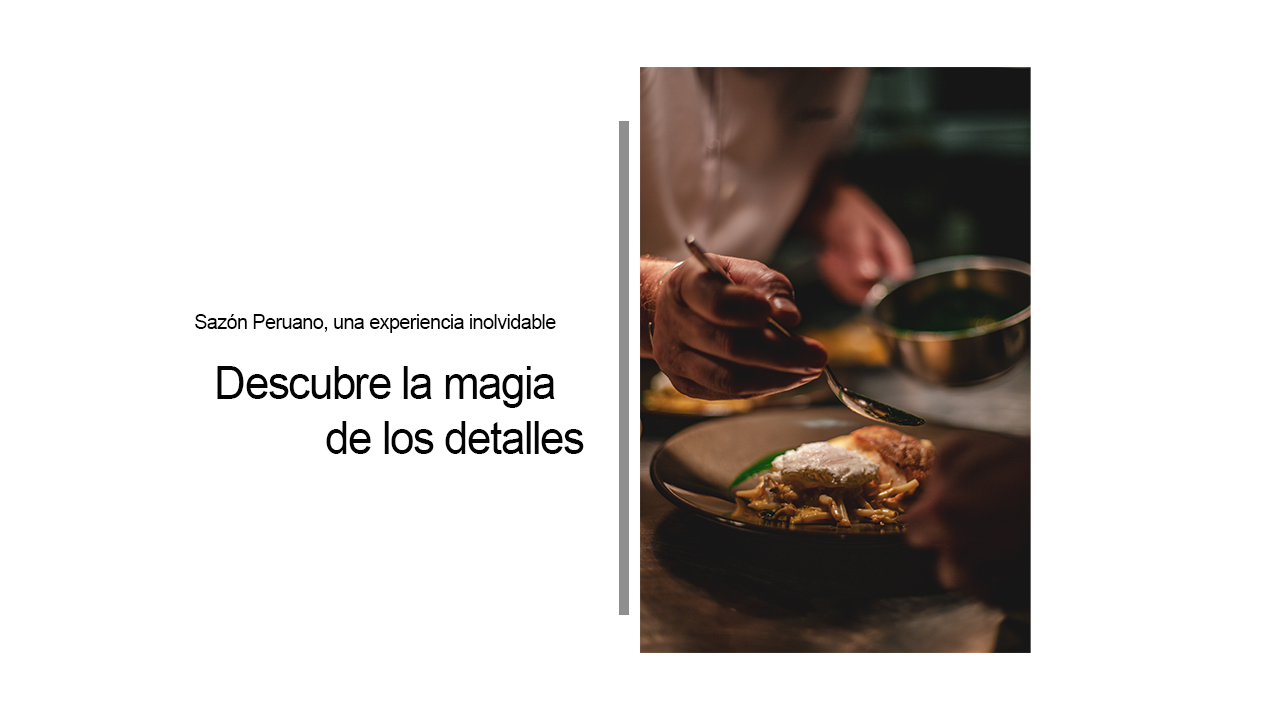
<style>
.page{position:relative;width:1280px;height:720px;background:#ffffff}
.page>*{position:absolute;margin:0}
.t1{font:20.9px "ArialMT";letter-spacing:-0.035em;color:#030303;scale:0.96 1}
.t2{font:45.9px "ArialMT";letter-spacing:-0.035em;color:#030303;scale:0.96 1}
</style>
<div class="page">
<p class="t1" style="left:195px;top:314px;width:361px;height:19px">Sazón Peruano, una experiencia inolvidable</p>
<p class="t2" style="left:217px;top:366px;width:367px;height:88px;text-align:center">Descubre la magia <br>            de los detalles</p>
</div>
